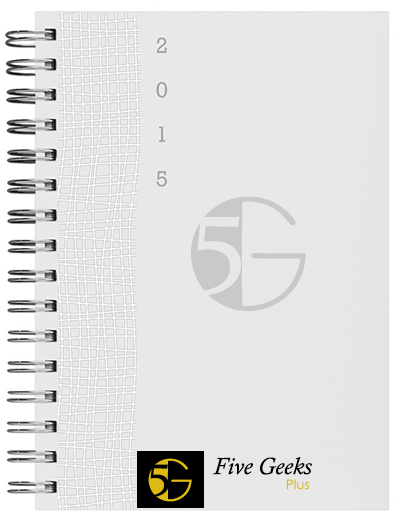
<style>
.page{position:relative;width:400px;height:523px;background:#e8e8e8}
.page>*{position:absolute;margin:0}
.t1{font:161.8px "Broadway";color:#c9c9ca}
.t2{font:116.5px "Constantia";color:#e7e7e7}
.t3{font:60px "Broadway";color:#ddba14}
.t4{font:24px "CalistoMT-Italic";color:#000000}
.t5{font:48px "Constantia";color:#000000}
.t6{font:13.3px "CenturyGothic";color:#ddba14}
</style>
<div class="page">
<p class="t1" style="left:191px;top:196px;width:115px;height:115px">G</p>
<p class="t2" style="left:195px;top:216px;width:46px;height:80px">5</p>
<p class="t3" style="left:148px;top:458px;width:44px;height:44px">G</p>
<p class="t4" style="left:213px;top:457px;width:100px;height:18px">Five Geeks</p>
<p class="t5" style="left:149px;top:464px;width:20px;height:34px">5</p>
<p class="t6" style="left:286px;top:479px;width:24px;height:11px">Plus</p>
</div>
